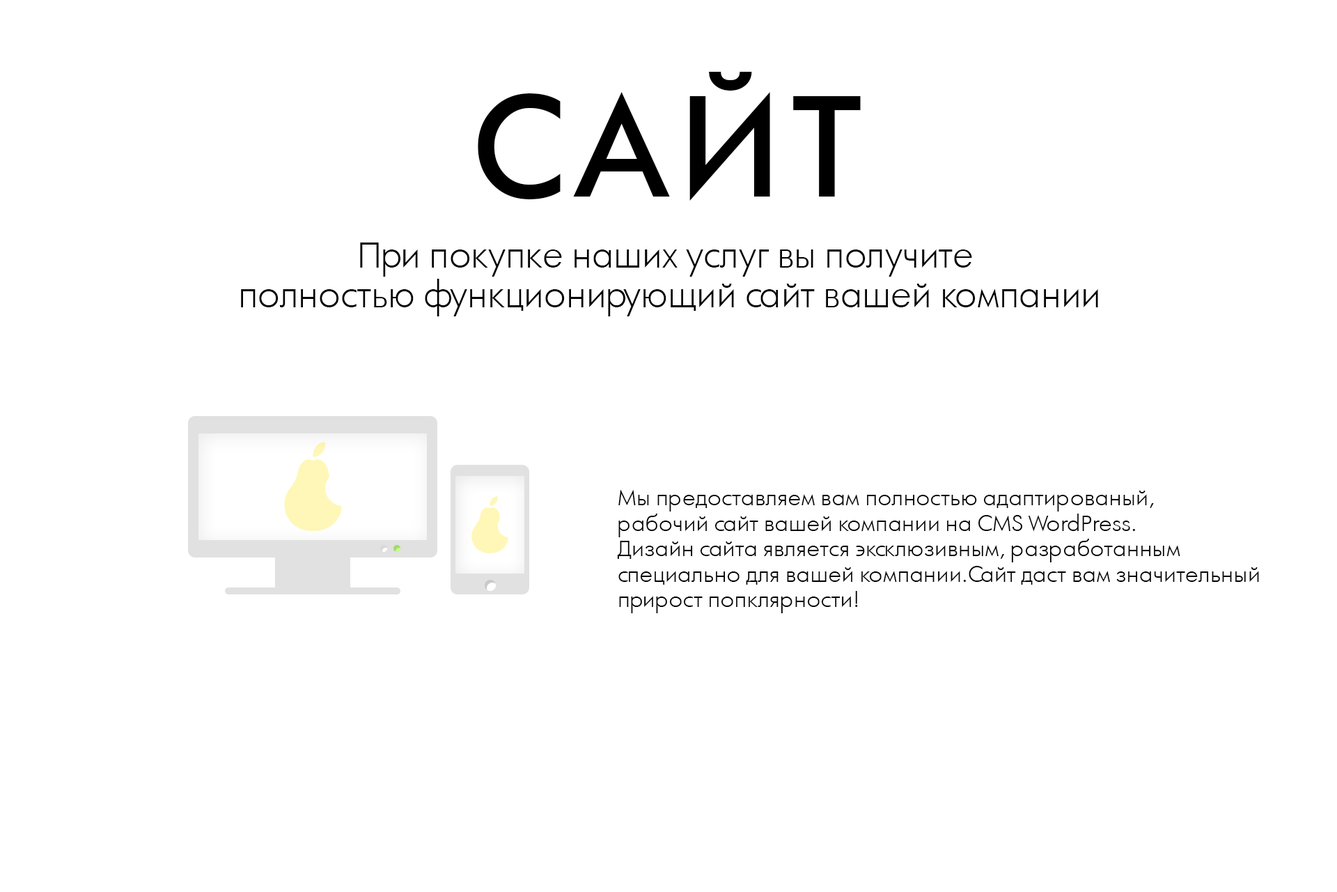
<style>
.page{position:relative;width:1337px;height:892px;background:#ffffff}
.page>*{position:absolute;margin:0}
.t1{font:136.8px "AFuturaOrtoLtBold";letter-spacing:0.08em;color:#000000}
.t2{font:33.4px "AFuturaOrtoLtLight";color:#000000}
.t3{font:21.2px "AFuturaOrtoLtLight";color:#000000}
</style>
<div class="page">
<p class="t1" style="left:478px;top:72px;width:383px;height:129px">САЙТ</p>
<p class="t2" style="left:241px;top:242px;width:857px;height:74px;text-align:center">При покупке наших услуг вы получите <br>полностью функционирующий сайт вашей компании</p>
<p class="t3" style="left:617px;top:489px;width:642px;height:124px">Мы предоставляем вам полностью адаптированый, <br>рабочий сайт вашей компании на CMS WordPress.<br>Дизайн сайта является эксклюзивным, разработанным<br>специально для вашей компании.Сайт даст вам значительный<br>прирост попклярности!</p>
</div>
